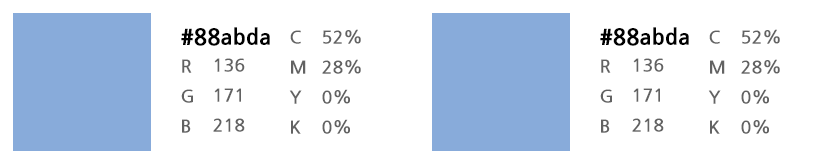
<style>
.page{position:relative;width:819px;height:164px;background:#ffffff}
.page>*{position:absolute;margin:0}
.t1{font:22px "NanumGothicExtraBold";color:#000000}
.t2{font:18px/30px "NanumGothicBold";color:#626262}
</style>
<div class="page">
<p class="t1" style="left:181px;top:27px;width:89px;height:19px">#88abda</p>
<p class="t2" style="left:289px;top:30px;width:17px;height:104px">C<br>M<br>Y<br>K</p>
<p class="t2" style="left:322px;top:29px;width:39px;height:105px">52%<br>28%<br>0%<br>0%</p>
<p class="t1" style="left:600px;top:27px;width:89px;height:19px">#88abda</p>
<p class="t2" style="left:708px;top:30px;width:17px;height:104px">C<br>M<br>Y<br>K</p>
<p class="t2" style="left:741px;top:29px;width:39px;height:105px">52%<br>28%<br>0%<br>0%</p>
<p class="t2" style="left:181px;top:59px;width:12px;height:74px">R<br>G<br>B</p>
<p class="t2" style="left:213px;top:58px;width:32px;height:74px">136<br>171<br>218</p>
<p class="t2" style="left:600px;top:59px;width:12px;height:74px">R<br>G<br>B</p>
<p class="t2" style="left:632px;top:58px;width:32px;height:74px">136<br>171<br>218</p>
</div>
